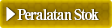
<style>
.page{position:relative;width:112px;height:28px}
.page>*{position:absolute;margin:0}
.t1{font:15px "RyuminPro-ExBold";letter-spacing:-0.08em;color:#ffffff;scale:0.9 1}
</style>
<div class="page">
<p class="t1" style="left:6px;top:7px;width:93px;height:14px">▶Peralatan Stok</p>
</div>
